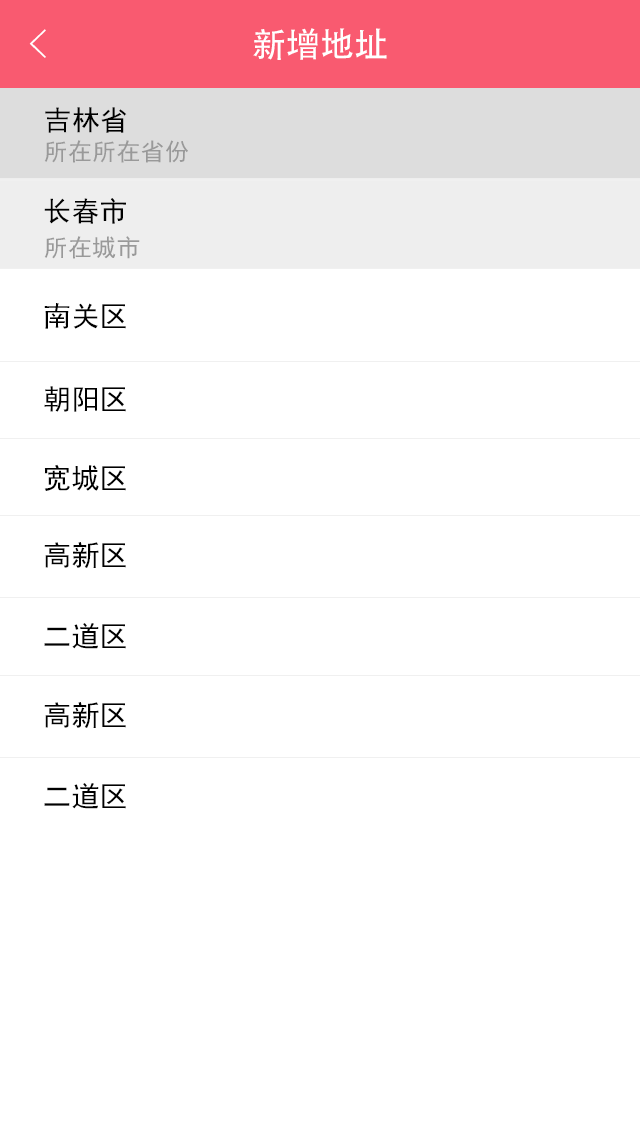
<style>
.page{position:relative;width:640px;height:1132px;background:#ffffff}
.page>*{position:absolute;margin:0}
.t1{font:40px "FZYXJW--GB1-0";color:#ffffff}
.t2{font:34px "AdobeHeitiStd-Regular";color:#ffffff}
.t3{font:28px "SimHei";letter-spacing:0.01em;color:#000000}
.t4{font:24px "SimHei";letter-spacing:0.01em;color:#999999}
</style>
<div class="page">
<p class="t1" style="left:29px;top:29px;width:17px;height:29px">&lt;</p>
<p class="t2" style="left:253px;top:28px;width:134px;height:32px">新增地址</p>
<p class="t3" style="left:45px;top:107px;width:82px;height:26px">吉林省</p>
<p class="t4" style="left:44px;top:140px;width:144px;height:23px">所在所在省份</p>
<p class="t3" style="left:44px;top:198px;width:82px;height:26px">长春市</p>
<p class="t4" style="left:44px;top:236px;width:96px;height:23px">所在城市</p>
<p class="t3" style="left:44px;top:303px;width:82px;height:26px">南关区</p>
<p class="t3" style="left:44px;top:386px;width:82px;height:26px">朝阳区</p>
<p class="t3" style="left:44px;top:464px;width:82px;height:27px">宽城区</p>
<p class="t3" style="left:44px;top:542px;width:82px;height:26px">高新区</p>
<p class="t3" style="left:44px;top:623px;width:82px;height:26px">二道区</p>
<p class="t3" style="left:44px;top:702px;width:82px;height:26px">高新区</p>
<p class="t3" style="left:44px;top:783px;width:82px;height:26px">二道区</p>
</div>
